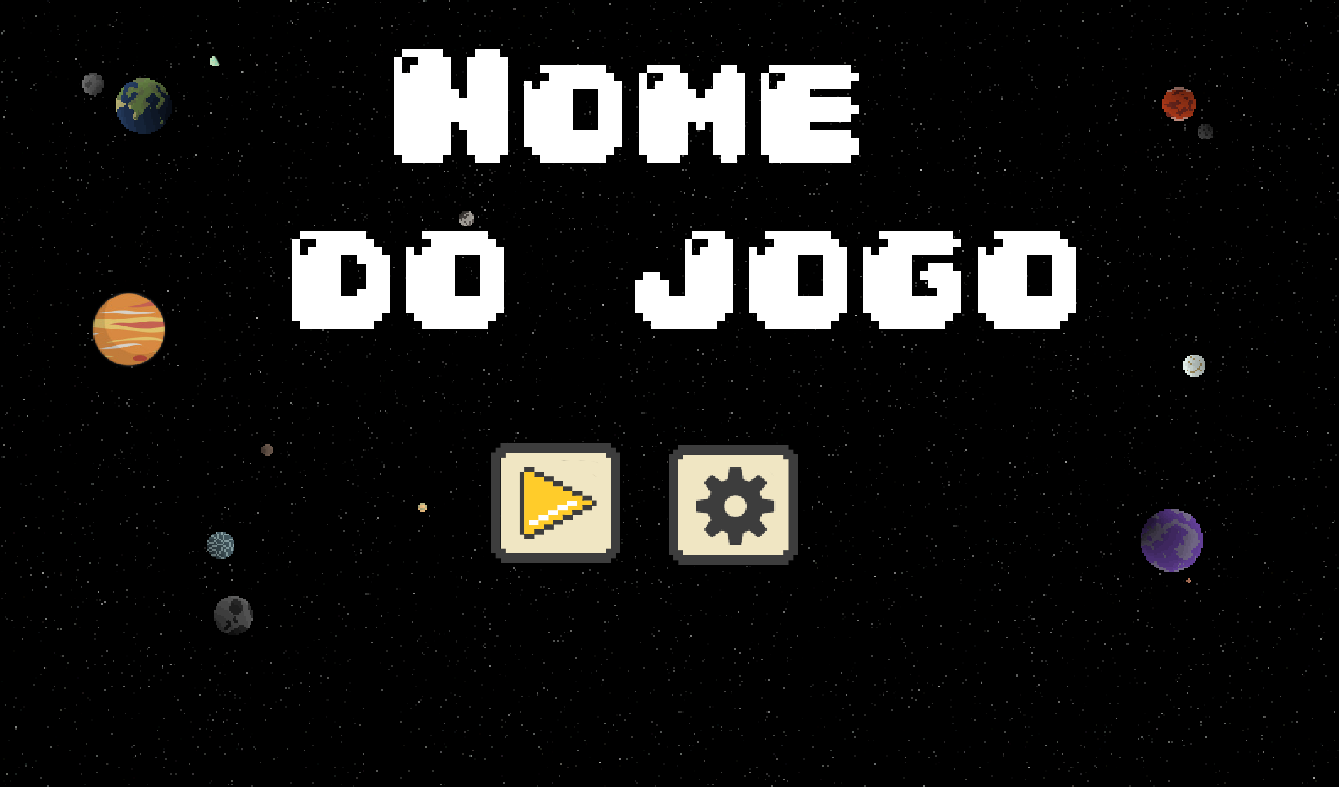
<style>
.page{position:relative;width:1339px;height:787px;background:#000000}
.page>*{position:absolute;margin:0}
.t1{font:138.9px "04b30";color:#ffffff}
</style>
<div class="page">
<p class="t1" style="left:292px;top:49px;width:784px;height:280px;text-align:center">Nome <br>do jogo</p>
</div>
